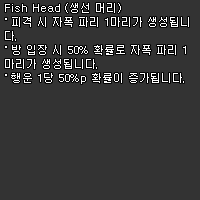
<style>
.page{position:relative;width:200px;height:200px;background:#333333}
.page>*{position:absolute;margin:0}
.t1{font:11px/14px "Dotum";color:#ffffff}
</style>
<div class="page">
<p class="t1" style="left:5px;top:3px;width:184px;height:81px">Fish Head (생선 머리)<br>˚ 피격 시 자폭 파리 1마리가 생성됩니<br>다.<br>˚ 방 입장 시 50% 확률로 자폭 파리 1<br>마리가 생성됩니다.<br>˚ 행운 1당 50%p 확률이 증가됩니다.</p>
</div>
